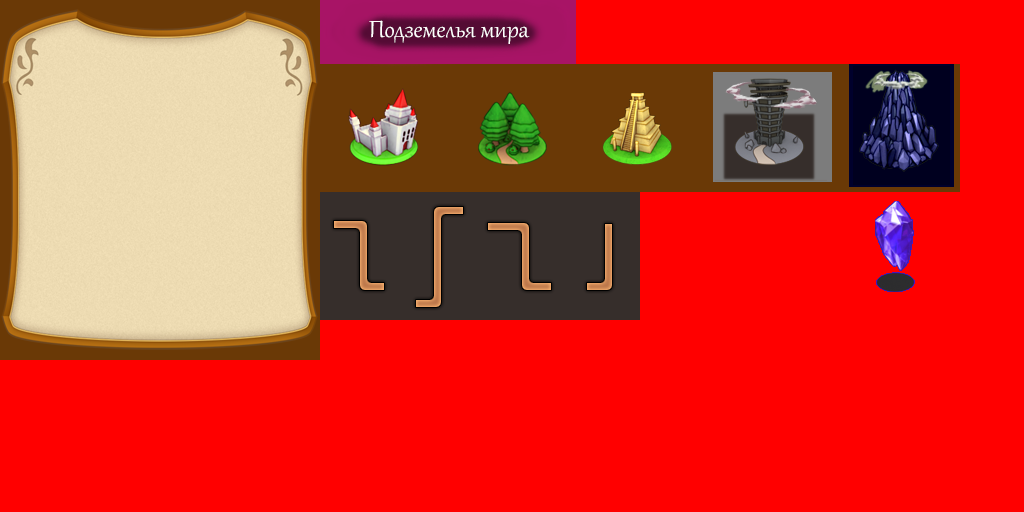
<style>
.page{position:relative;width:1024px;height:512px;background:#ff0000}
.page>*{position:absolute;margin:0}
.t1{font:28.9px "Gabriola";color:#ffffff}
</style>
<div class="page">
<p class="t1" style="left:369px;top:20px;width:161px;height:24px">Подземелья мира</p>
</div>
